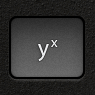
<style>
.page{position:relative;width:95px;height:95px}
.page>*{position:absolute;margin:0}
.t1{font:24px "MyriadPro-Regular";letter-spacing:0.1em;color:#ffffff}
.t2{font:24px "MyriadPro-Regular";color:#ffffff}
</style>
<div class="page">
<p class="t1" style="left:38px;top:40px;width:20px;height:21px">y<span class="t2">x</span></p>
</div>
